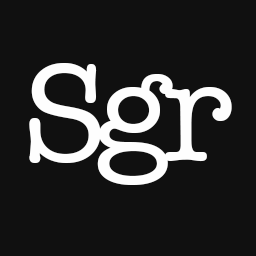
<style>
.page{position:relative;width:256px;height:256px;background:#101010}
.page>*{position:absolute;margin:0}
.t1{font:141px "AmericanTypewriter";color:#fefefe}
</style>
<div class="page">
<p class="t1" style="left:29px;top:63px;width:203px;height:122px">Sgr</p>
</div>
